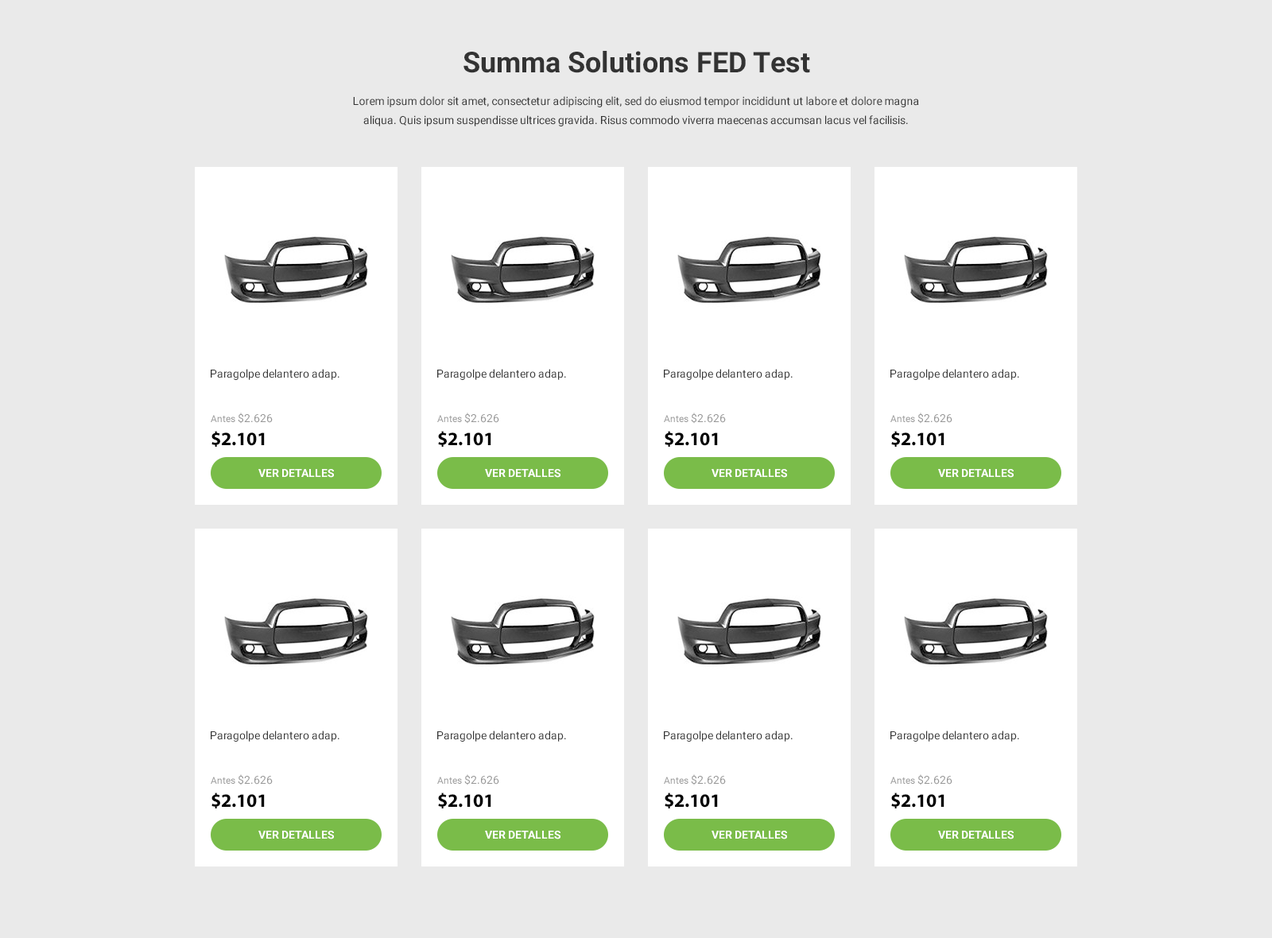
<style>
.page{position:relative;width:1272px;height:938px;background:#eaeaea}
.page>*{position:absolute;margin:0}
.t1{font:28.6px "Roboto-Bold";color:#333333}
.t2{font:11.1px/19.1px "Roboto-Regular";color:#333333}
.t3{font:11.1px "Roboto-Regular";color:#383838}
.t4{font:11.1px "Roboto-Regular";color:#989898}
.t5{font:9.5px "Roboto-Regular";color:#989898}
.t6{font:19.1px "MyriadPro-Bold";color:#000000}
.t7{font:11.1px "Roboto-Bold";color:#ffffff;text-transform:uppercase}
</style>
<div class="page">
<p class="t1" style="left:463px;top:51px;width:347px;height:22px">Summa Solutions FED Test</p>
<p class="t2" style="left:353px;top:96px;width:566px;height:30px;text-align:center">Lorem ipsum dolor sit amet, consectetur adipiscing elit, sed do eiusmod tempor incididunt ut labore et dolore magna aliqua. Quis ipsum suspendisse ultrices gravida. Risus commodo viverra maecenas accumsan lacus vel facilisis.</p>
<p class="t3" style="left:211px;top:369px;width:128px;height:11px">Paragolpe delantero adap.</p>
<p class="t3" style="left:437px;top:369px;width:129px;height:11px">Paragolpe delantero adap.</p>
<p class="t3" style="left:664px;top:369px;width:128px;height:11px">Paragolpe delantero adap.</p>
<p class="t3" style="left:890px;top:369px;width:129px;height:11px">Paragolpe delantero adap.</p>
<p class="t4" style="left:211px;top:412px;width:62px;height:12px"><span class="t5">Antes </span>$2.626</p>
<p class="t4" style="left:437px;top:412px;width:62px;height:12px"><span class="t5">Antes </span>$2.626</p>
<p class="t4" style="left:664px;top:412px;width:62px;height:12px"><span class="t5">Antes </span>$2.626</p>
<p class="t4" style="left:890px;top:412px;width:62px;height:12px"><span class="t5">Antes </span>$2.626</p>
<p class="t6" style="left:211px;top:431px;width:54px;height:16px">$2.101</p>
<p class="t6" style="left:438px;top:431px;width:53px;height:16px">$2.101</p>
<p class="t6" style="left:664px;top:431px;width:54px;height:16px">$2.101</p>
<p class="t6" style="left:891px;top:431px;width:53px;height:16px">$2.101</p>
<p class="t7" style="left:258px;top:469px;width:76px;height:9px">Ver detalles</p>
<p class="t7" style="left:485px;top:469px;width:75px;height:9px">Ver detalles</p>
<p class="t7" style="left:711px;top:469px;width:76px;height:9px">Ver detalles</p>
<p class="t7" style="left:938px;top:469px;width:75px;height:9px">Ver detalles</p>
<p class="t3" style="left:211px;top:730px;width:128px;height:11px">Paragolpe delantero adap.</p>
<p class="t3" style="left:437px;top:730px;width:129px;height:11px">Paragolpe delantero adap.</p>
<p class="t3" style="left:664px;top:730px;width:128px;height:11px">Paragolpe delantero adap.</p>
<p class="t3" style="left:890px;top:730px;width:129px;height:11px">Paragolpe delantero adap.</p>
<p class="t4" style="left:211px;top:774px;width:62px;height:11px"><span class="t5">Antes </span>$2.626</p>
<p class="t4" style="left:437px;top:774px;width:62px;height:11px"><span class="t5">Antes </span>$2.626</p>
<p class="t4" style="left:664px;top:774px;width:62px;height:11px"><span class="t5">Antes </span>$2.626</p>
<p class="t4" style="left:890px;top:774px;width:62px;height:11px"><span class="t5">Antes </span>$2.626</p>
<p class="t6" style="left:211px;top:792px;width:54px;height:16px">$2.101</p>
<p class="t6" style="left:438px;top:792px;width:53px;height:16px">$2.101</p>
<p class="t6" style="left:664px;top:792px;width:54px;height:16px">$2.101</p>
<p class="t6" style="left:891px;top:792px;width:53px;height:16px">$2.101</p>
<p class="t7" style="left:258px;top:830px;width:76px;height:9px">Ver detalles</p>
<p class="t7" style="left:485px;top:830px;width:75px;height:9px">Ver detalles</p>
<p class="t7" style="left:711px;top:830px;width:76px;height:9px">Ver detalles</p>
<p class="t7" style="left:938px;top:830px;width:75px;height:9px">Ver detalles</p>
</div>
